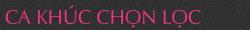
<style>
.page{position:relative;width:250px;height:30px;background:#313131}
.page>*{position:absolute;margin:0}
.t1{font:20px "UVNNhan";color:#f43385}
</style>
<div class="page">
<p class="t1" style="left:5px;top:5px;width:196px;height:23px">CA KHÚC CHỌN LỌC</p>
</div>
